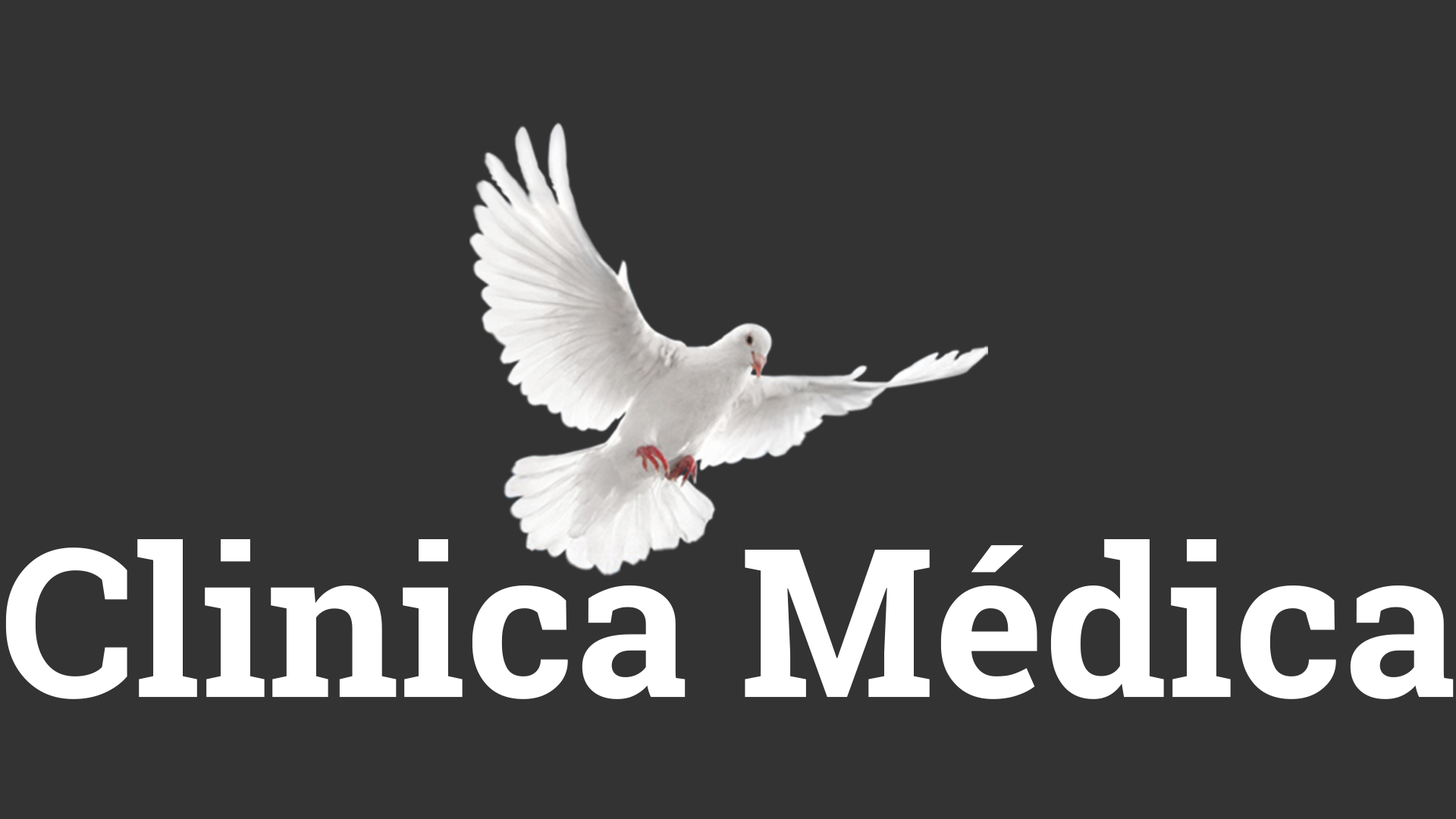
<style>
.page{position:relative;width:1456px;height:819px;background:#333333}
.page>*{position:absolute;margin:0}
.t1{font:207.1px "RobotoSlab-Bold";color:#ffffff}
</style>
<div class="page">
<p class="t1" style="left:5px;top:539px;width:1449px;height:160px">Clinica Médica</p>
</div>
